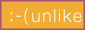
<style>
.page{position:relative;width:85px;height:30px;background:#f1ad33}
.page>*{position:absolute;margin:0}
.t1{font:18px "HelveticaNeueLTCom-Lt";letter-spacing:0.075em;color:#ffffff}
</style>
<div class="page">
<p class="t1" style="left:10px;top:8px;width:18px;height:17px">:-(</p>
<p class="t1" style="left:32px;top:9px;width:50px;height:14px">unlike</p>
</div>
